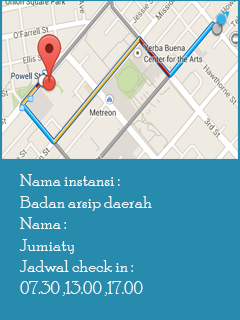
<style>
.page{position:relative;width:240px;height:320px;background:#268bac}
.page>*{position:absolute;margin:0}
.t1{font:18px "PoorRichard-Regular";color:#f4f9fa}
</style>
<div class="page">
<p class="t1" style="left:19px;top:174px;width:133px;height:122px">Nama instansi :<br>Badan arsip daerah<br>Nama : <br>Jumiaty<br>Jadwal check in :<br>07.30 ,13.00 ,17.00</p>
</div>
